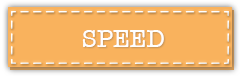
<style>
.page{position:relative;width:242px;height:76px;background:#f9b25d}
.page>*{position:absolute;margin:0}
.t1{font:25px "AmericanTypewriter";color:#ffffff}
</style>
<div class="page">
<p class="t1" style="left:82px;top:30px;width:82px;height:17px">SPEED</p>
</div>
